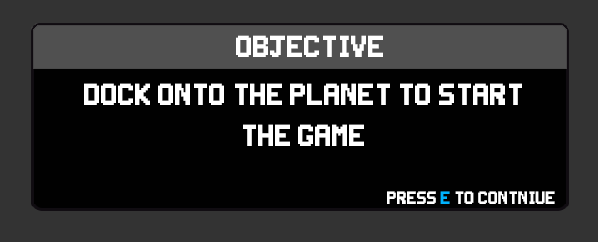
<style>
.page{position:relative;width:598px;height:242px;background:#010101}
.page>*{position:absolute;margin:0}
.t1{font:34px "Super-Smash-TV";color:#ffffff}
.t2{font:20px "Super-Smash-TV";color:#ffffff}
.t3{font:20px "Super-Smash-TV";color:#00b3fe}
</style>
<div class="page">
<p class="t1" style="left:236px;top:35px;width:147px;height:22px">Objective</p>
<p class="t1" style="left:84px;top:83px;width:438px;height:63px;text-align:center">dock onto the planet to start the game</p>
<p class="t2" style="left:387px;top:191px;width:168px;height:13px">Press <span class="t3">e</span> to contniue</p>
</div>
